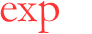
<style>
.page{position:relative;width:92px;height:34px;background:#ffffff}
.page>*{position:absolute;margin:0}
.t1{font:45.7px "Garamond";color:#ff3333}
</style>
<div class="page">
<p class="t1" style="left:0px;top:2px;width:17px;height:20px">e</p>
<p class="t1" style="left:17px;top:3px;width:20px;height:19px">x</p>
<p class="t1" style="left:38px;top:1px;width:21px;height:32px">p</p>
</div>
